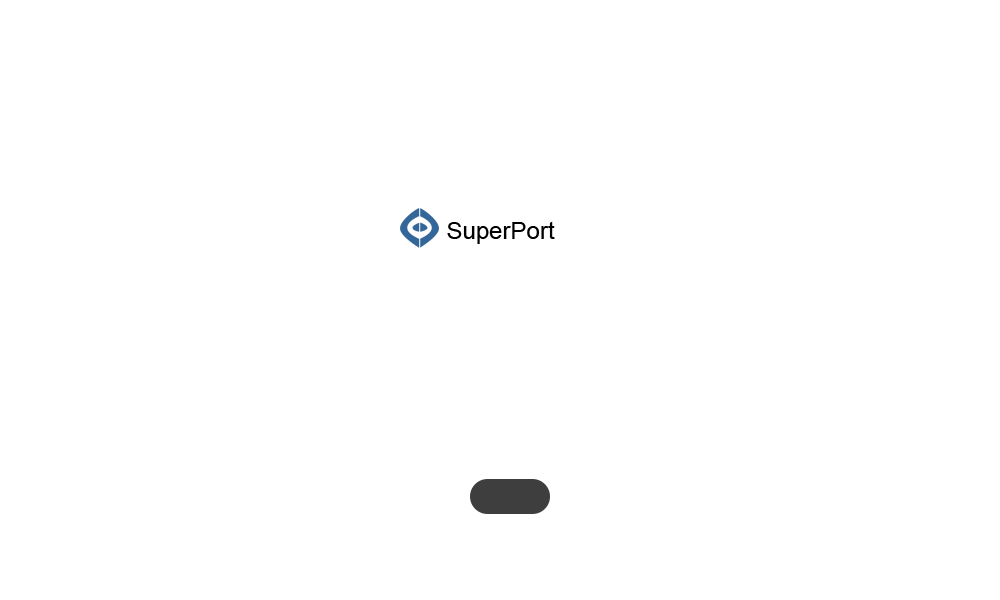
<style>
.page{position:relative;width:1000px;height:600px;background:#ffffff}
.page>*{position:absolute;margin:0}
.t1{font:24px "ArialMT";color:#000000}
</style>
<div class="page">
<p class="t1" style="left:447px;top:221px;width:108px;height:23px">SuperPort</p>
</div>
